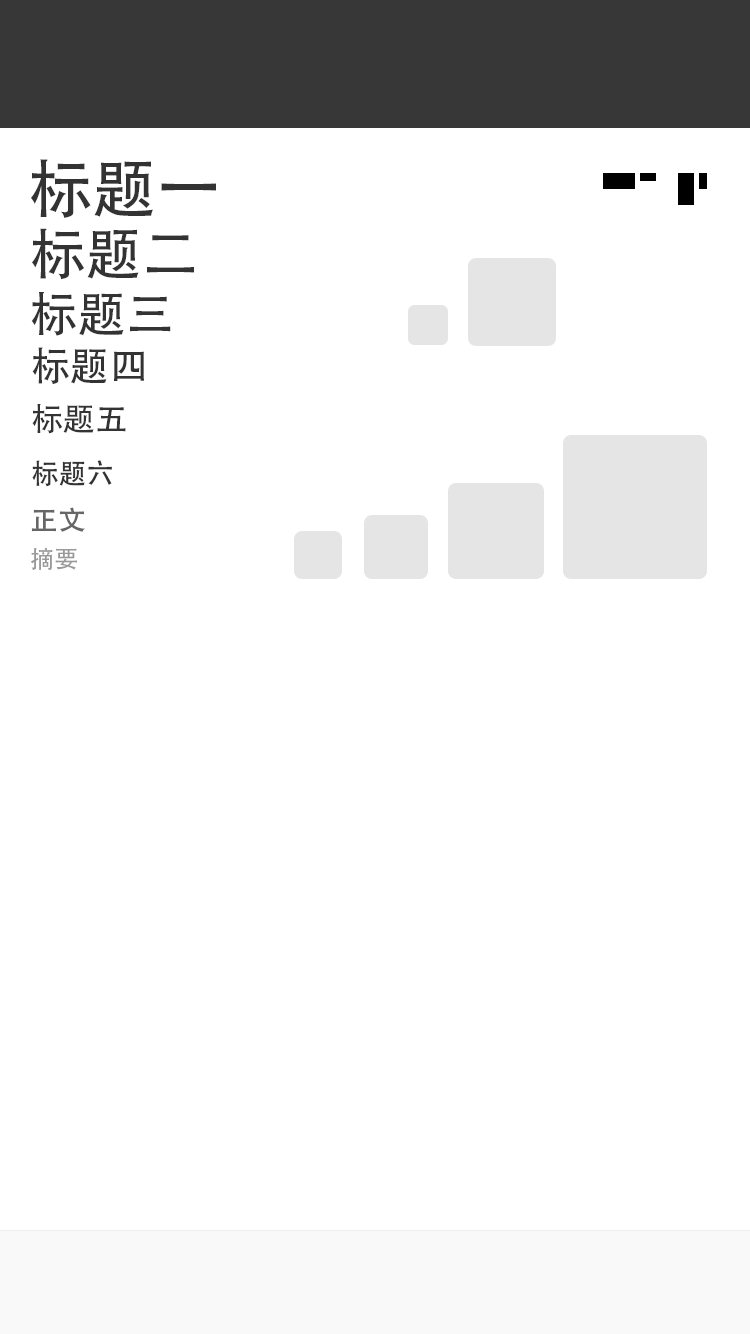
<style>
.page{position:relative;width:750px;height:1334px;background:#ffffff}
.page>*{position:absolute;margin:0}
.t1{font:64px "AdobeHeitiStd-Regular";color:#333333}
.t2{font:56px "AdobeHeitiStd-Regular";color:#333333}
.t3{font:48px "AdobeHeitiStd-Regular";color:#333333}
.t4{font:40px "AdobeHeitiStd-Regular";color:#333333}
.t5{font:32px "AdobeHeitiStd-Regular";color:#333333}
.t6{font:28px "AdobeHeitiStd-Regular";color:#333333}
.t7{font:28px "AdobeHeitiStd-Regular";color:#666666}
.t8{font:24px "AdobeHeitiStd-Regular";color:#999999}
</style>
<div class="page">
<p class="t1" style="left:31px;top:159px;width:185px;height:59px">标题一</p>
<p class="t2" style="left:32px;top:228px;width:162px;height:52px">标题二</p>
<p class="t3" style="left:31px;top:291px;width:140px;height:45px">标题三</p>
<p class="t4" style="left:32px;top:347px;width:112px;height:37px">标题四</p>
<p class="t5" style="left:32px;top:404px;width:94px;height:30px">标题五</p>
<p class="t6" style="left:32px;top:460px;width:80px;height:27px">标题六</p>
<p class="t7" style="left:31px;top:507px;width:54px;height:25px">正文</p>
<p class="t8" style="left:31px;top:547px;width:46px;height:23px">摘要</p>
</div>
